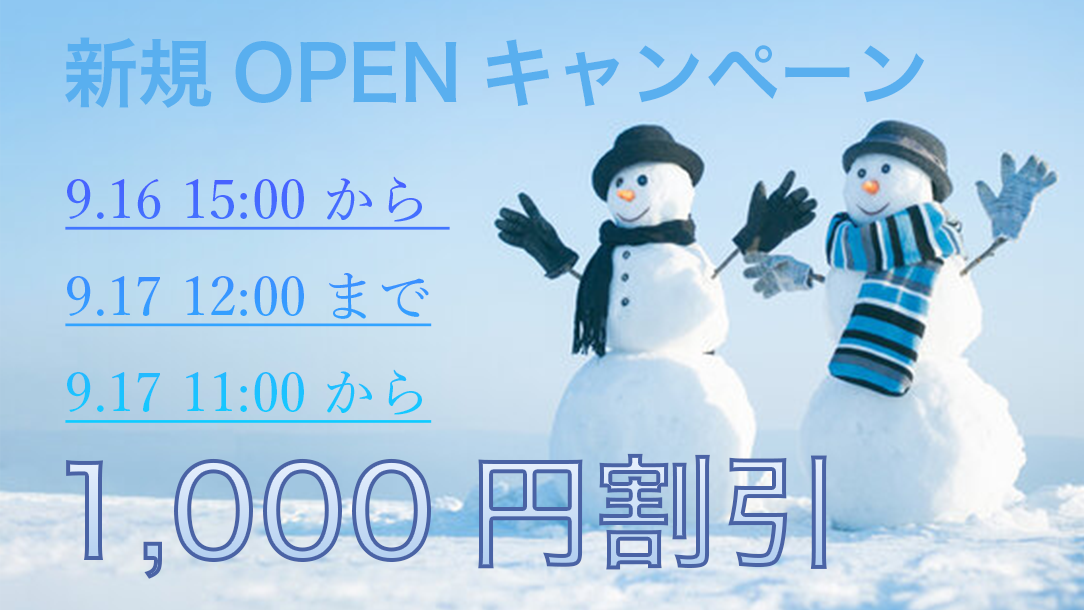
<style>
.page{position:relative;width:1084px;height:610px}
.page>*{position:absolute;margin:0}
.t1{font:75px "HiraKakuPro-W6";color:#59afef}
.t2{font:55.2px "YuMin-Medium";text-decoration:underline}
.t3{font:125px "HiraKakuPro-W6"}
</style>
<div class="page">
<p class="t1" style="left:65px;top:37px;width:859px;height:71px">新規OPENキャンペーン</p>
<p class="t2" style="left:65px;top:176px;width:385px;height:247px">9.16 15:00から <br>9.17 12:00まで<br>9.17 11:00から</p>
<p class="t3" style="left:66px;top:453px;width:761px;height:126px">1,000円割引</p>
</div>
